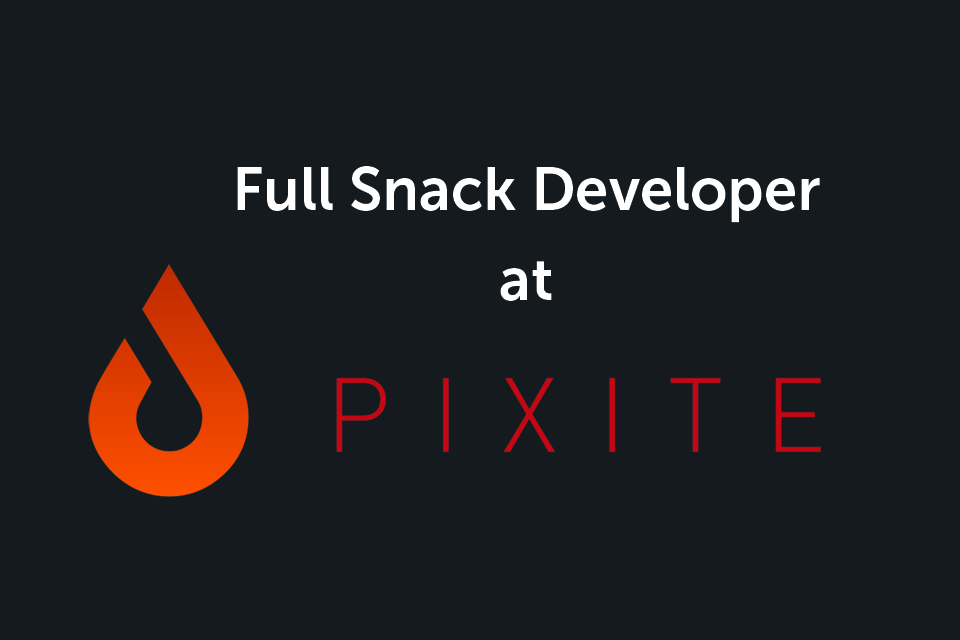
<style>
.page{position:relative;width:960px;height:640px;background:#141a1e}
.page>*{position:absolute;margin:0}
.t1{font:60px/90px "MuseoSans-700";color:#ffffff}
</style>
<div class="page">
<p class="t1" style="left:237px;top:166px;width:583px;height:135px;text-align:center">Full Snack Developer<br>at</p>
</div>
